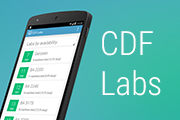
<style>
.page{position:relative;width:180px;height:120px}
.page>*{position:absolute;margin:0}
.t1{font:33.3px "RobotoCondensed-Light";color:#ffffff}
</style>
<div class="page">
<p class="t1" style="left:102px;top:31px;width:59px;height:65px">CDF<br>Labs</p>
</div>
